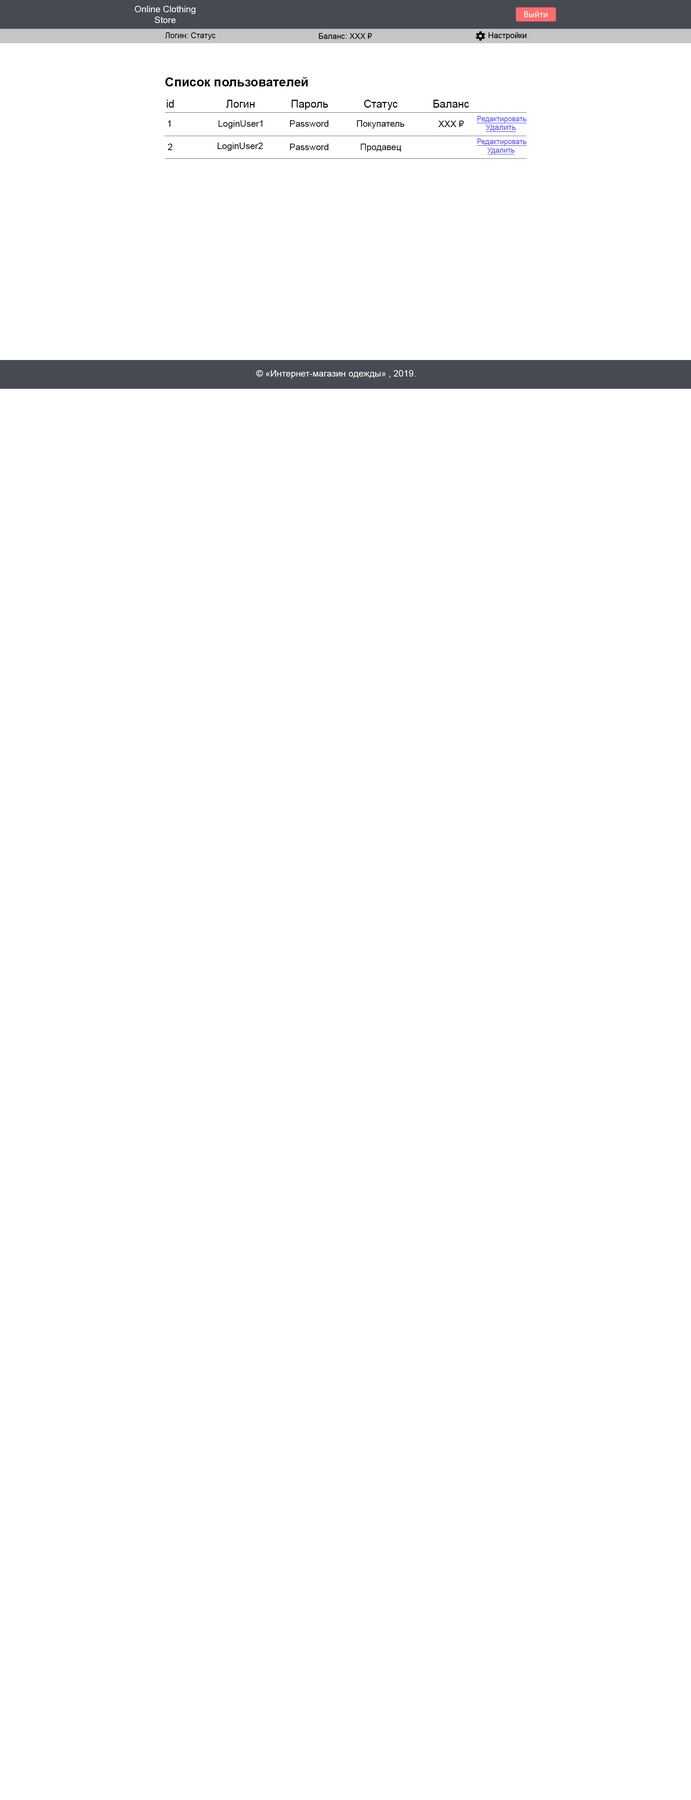
<style>
.page{position:relative;width:691px;height:1800px;background:#ffffff}
.page>*{position:absolute;margin:0}
.t1{font:9px "ArialMT";color:#ffffff}
.t2{font:7.9px "ArialMT";color:#000000}
.t3{font:12.6px "Arial-BoldMT";color:#000000}
.t4{font:10.8px "ArialMT";color:#000000}
.t5{font:9px "ArialMT";color:#000000}
.t6{font:7.2px "ArialMT";color:#5b54f8;text-decoration:underline}
.t7{font:7.9px "ArialMT";color:#5b54f8;text-decoration:underline}
</style>
<div class="page">
<p class="t1" style="left:135px;top:6px;width:60px;height:17px;text-align:center">Online Clothing<br>Store</p>
<p class="t2" style="left:165px;top:32px;width:51px;height:8px">Логин: Статус</p>
<p class="t2" style="left:319px;top:33px;width:53px;height:6px">Баланс: XXX ₽</p>
<p class="t3" style="left:165px;top:77px;width:143px;height:9px">Список пользователей</p>
<p class="t4" style="left:167px;top:100px;width:7px;height:8px">id</p>
<p class="t4" style="left:226px;top:100px;width:29px;height:8px">Логин</p>
<p class="t4" style="left:292px;top:100px;width:36px;height:10px">Пароль</p>
<p class="t4" style="left:364px;top:100px;width:34px;height:10px">Статус</p>
<p class="t4" style="left:433px;top:100px;width:36px;height:8px">Баланс</p>
<p class="t5" style="left:168px;top:120px;width:3px;height:7px">1</p>
<p class="t5" style="left:219px;top:120px;width:43px;height:9px">LoginUser1</p>
<p class="t5" style="left:290px;top:120px;width:39px;height:7px">Password</p>
<p class="t5" style="left:357px;top:120px;width:48px;height:9px">Покупатель</p>
<p class="t5" style="left:438px;top:121px;width:26px;height:6px">XXX ₽</p>
<p class="t6" style="left:477px;top:116px;width:50px;height:7px">Редактировать</p>
<p class="t7" style="left:486px;top:124px;width:30px;height:8px">Удалить</p>
<p class="t5" style="left:168px;top:144px;width:4px;height:6px">2</p>
<p class="t5" style="left:217px;top:143px;width:46px;height:8px">LoginUser2</p>
<p class="t5" style="left:290px;top:144px;width:39px;height:6px">Password</p>
<p class="t5" style="left:361px;top:144px;width:40px;height:8px">Продавец</p>
<p class="t6" style="left:477px;top:139px;width:50px;height:7px">Редактировать</p>
<p class="t6" style="left:487px;top:147px;width:28px;height:8px">Удалить</p>
<p class="t1" style="left:256px;top:370px;width:159px;height:8px">© «Интернет-магазин одежды» , 2019.</p>
</div>
